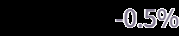
<style>
.page{position:relative;width:179px;height:36px;background:#000000}
.page>*{position:absolute;margin:0}
.t1{font:24px "WebPSD-18463539-0-Regular";color:#837a91;font-weight:bold}
</style>
<div class="page">
<p class="t1" style="left:0px;top:0px;width:179px;height:36px">-0.5%</p>
</div>
